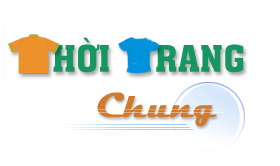
<style>
.page{position:relative;width:280px;height:166px;background:#ffffff}
.page>*{position:absolute;margin:0}
.t1{font:36px "Aachen-Bold";color:#169661}
.t2{font:36px "Magneto-Bold";color:#d07a2e}
</style>
<div class="page">
<p class="t1" style="left:53px;top:37px;width:191px;height:36px">HỜI    RANG</p>
<p class="t2" style="left:97px;top:92px;width:120px;height:35px">Chung</p>
</div>
